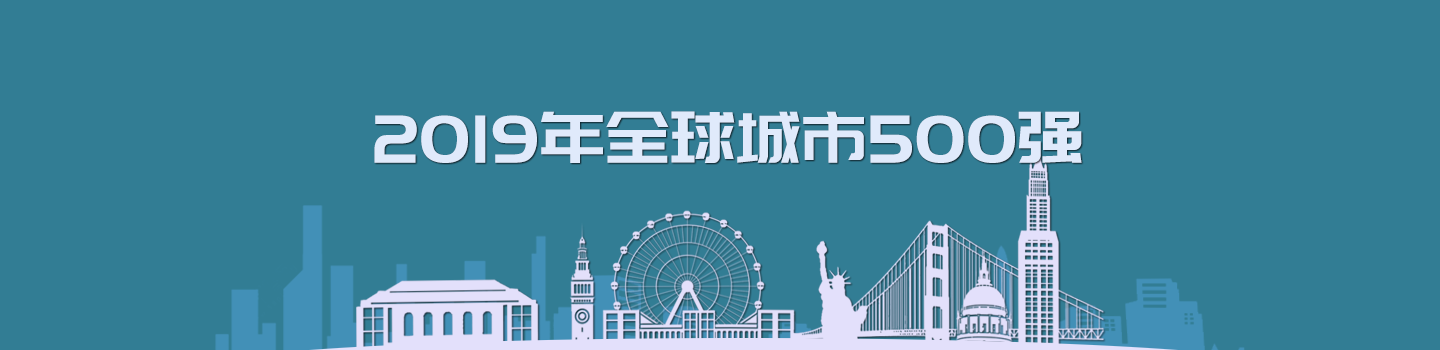
<style>
.page{position:relative;width:1440px;height:350px;background:#327d94}
.page>*{position:absolute;margin:0}
.t1{font:70.8px "PangMenZhengDao";color:#e0eafb}
</style>
<div class="page">
<p class="t1" style="left:374px;top:111px;width:708px;height:52px">2019年全球城市500强</p>
</div>
